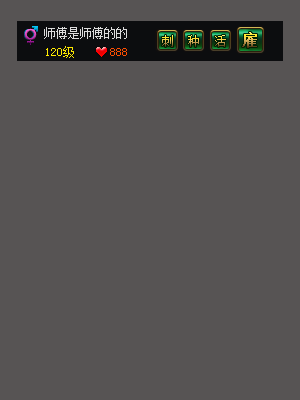
<style>
.page{position:relative;width:300px;height:400px;background:#575454}
.page>*{position:absolute;margin:0}
.t1{font:12px "SimSun";color:#dcdcdc}
.t2{font:12px "SimSun";color:#ffea00}
.t3{font:12px "SimSun";color:#ff4e00}
</style>
<div class="page">
<p class="t1" style="left:44px;top:27px;width:83px;height:12px">师傅是师傅的的</p>
<p class="t2" style="left:46px;top:46px;width:28px;height:12px">120级</p>
<p class="t3" style="left:110px;top:48px;width:17px;height:8px">888</p>
</div>
